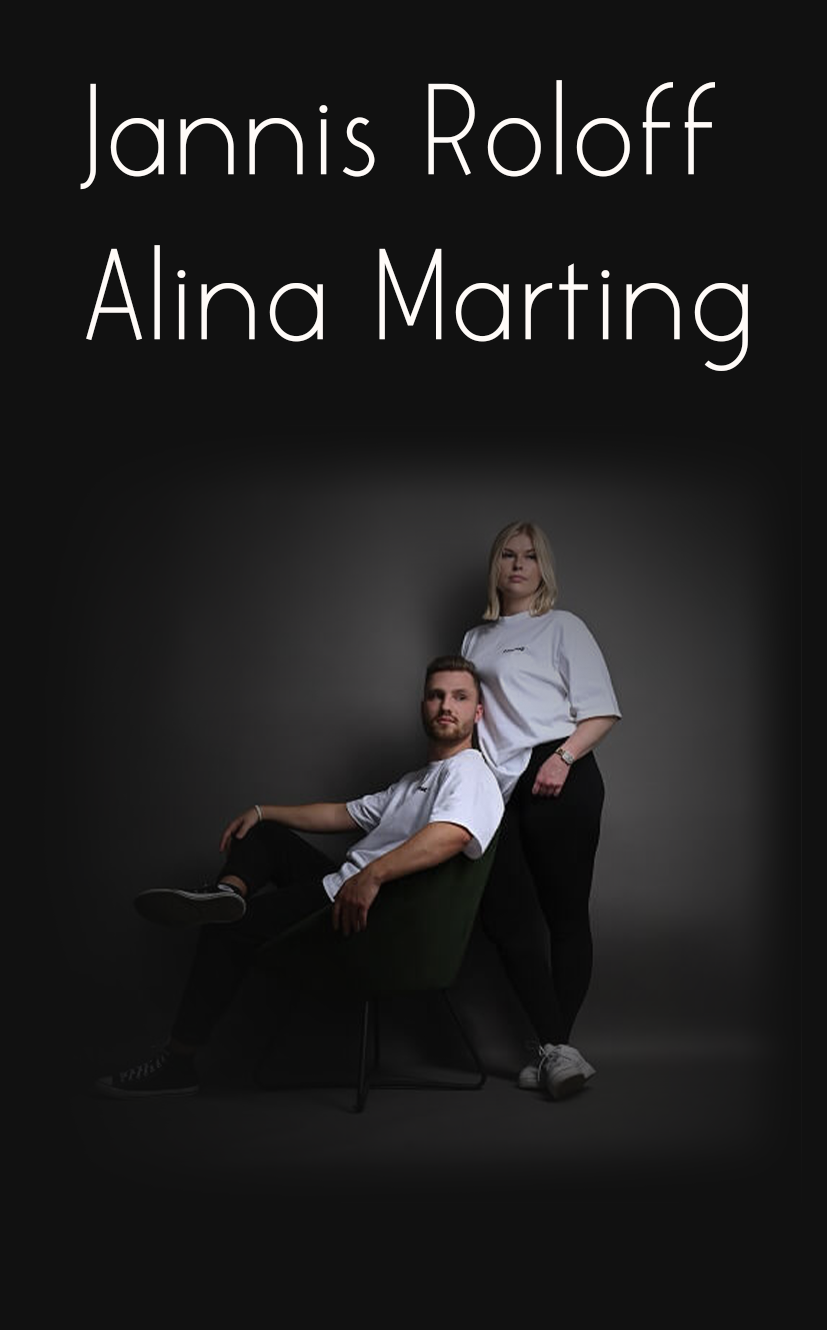
<style>
.page{position:relative;width:827px;height:1330px;background:#111111}
.page>*{position:absolute;margin:0}
.t1{font:137.5px "Colombia-Regular";color:#fffbf8}
</style>
<div class="page">
<p class="t1" style="left:80px;top:80px;width:668px;height:291px">Jannis Roloff<br>Alina Marting</p>
</div>
